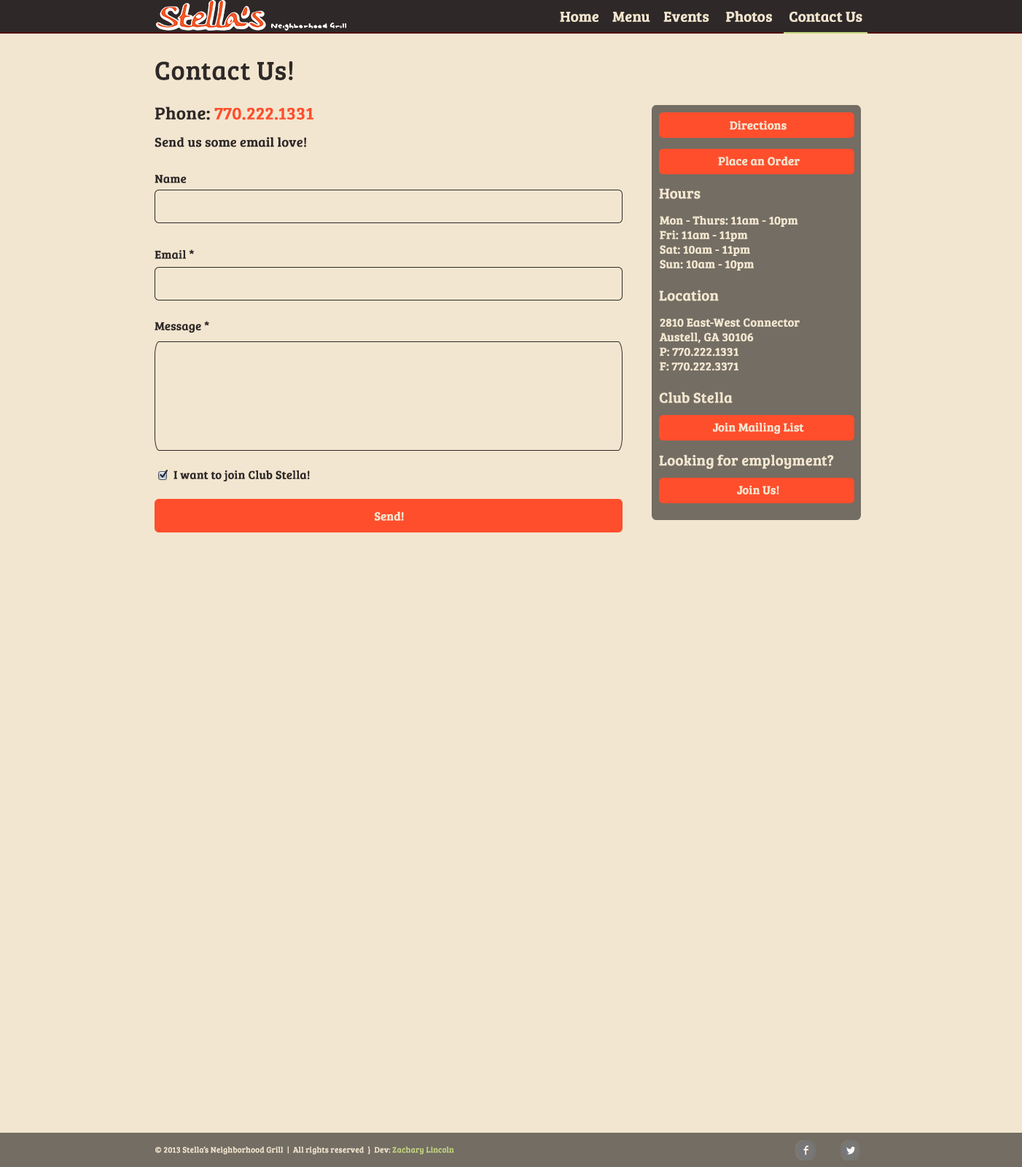
<style>
.page{position:relative;width:1022px;height:1167px;background:#f3e6d0}
.page>*{position:absolute;margin:0}
.t1{font:14.6px "BreeSerif-Regular";color:#f3e6d0;font-weight:bold}
.t2{font:26.2px "BreeSerif-Regular";color:#2e2828;font-weight:bold}
.t3{font:17.5px "BreeSerif-Regular";color:#ff4e2c;font-weight:bold}
.t4{font:17.5px "BreeSerif-Regular";color:#2e2828;font-weight:bold}
.t5{font:11.7px "BreeSerif-Regular";color:#f3e6d0;font-weight:bold}
.t6{font:13.1px "BreeSerif-Regular";color:#2e2828;font-weight:bold}
.t7{font:11.7px "BreeSerif-Regular";color:#2e2828;font-weight:bold}
.t8{font:11.7px/14.6px "BreeSerif-Regular";color:#f3e6d0;font-weight:bold}
.t9{font:8px "BreeSerif-Regular";color:#f3e6d0;font-weight:bold}
.t10{font:8px "BreeSerif-Regular";color:#c5d580;font-weight:bold}
</style>
<div class="page">
<p class="t1" style="left:560px;top:11px;width:303px;height:11px">Home    Menu    Events     Photos     Contact Us</p>
<p class="t2" style="left:155px;top:61px;width:138px;height:19px">Contact Us!</p>
<p class="t3" style="left:155px;top:106px;width:159px;height:14px"><span class="t4">Phone: </span>770.222.1331</p>
<p class="t5" style="left:730px;top:120px;width:57px;height:10px">Directions</p>
<p class="t6" style="left:155px;top:137px;width:151px;height:10px">Send us some email love!</p>
<p class="t5" style="left:718px;top:156px;width:82px;height:10px">Place an Order</p>
<p class="t7" style="left:155px;top:174px;width:32px;height:9px">Name</p>
<p class="t1" style="left:659px;top:188px;width:42px;height:11px">Hours</p>
<p class="t8" style="left:660px;top:216px;width:138px;height:54px">Mon - Thurs: 11am - 10pm<br>Fri: 11am - 11pm<br>Sat: 10am - 11pm<br>Sun: 10am - 10pm</p>
<p class="t7" style="left:155px;top:249px;width:39px;height:10px">Email *</p>
<p class="t1" style="left:659px;top:289px;width:60px;height:12px">Location</p>
<p class="t8" style="left:659px;top:318px;width:141px;height:52px">2810 East-West Connector<br>Austell, GA 30106<br>P: 770.222.1331<br>F: 770.222.3371</p>
<p class="t7" style="left:155px;top:321px;width:54px;height:11px">Message *</p>
<p class="t1" style="left:659px;top:392px;width:74px;height:11px">Club Stella</p>
<p class="t5" style="left:713px;top:422px;width:91px;height:12px">Join Mailing List</p>
<p class="t1" style="left:659px;top:454px;width:175px;height:15px">Looking for employment?</p>
<p class="t7" style="left:174px;top:470px;width:136px;height:11px">I want to join Club Stella!</p>
<p class="t5" style="left:737px;top:485px;width:42px;height:9px">Join Us!</p>
<p class="t5" style="left:375px;top:511px;width:29px;height:10px">Send!</p>
<p class="t9" style="left:155px;top:1145px;width:299px;height:9px">© 2013 Stella’s Neighborhood Grill  |  All rights reserved  }  Dev: <span class="t10">Zachary Lincoln</span></p>
</div>
